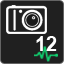
<style>
.page{position:relative;width:64px;height:64px;background:#202020}
.page>*{position:absolute;margin:0}
.t1{font:20px "Arial-BoldMT";color:#ffffff}
</style>
<div class="page">
<p class="t1" style="left:36px;top:36px;width:21px;height:15px">12</p>
</div>
